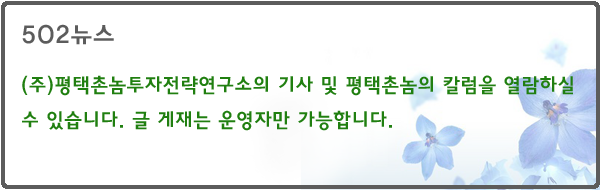
<style>
.page{position:relative;width:600px;height:190px;background:#ffffff}
.page>*{position:absolute;margin:0}
.t1{font:25px "HaanYGodic24";color:#5c5c5c}
.t2{font:20px "HaanYGodic24";color:#207e10}
</style>
<div class="page">
<p class="t1" style="left:22px;top:24px;width:92px;height:21px">502뉴스</p>
<p class="t2" style="left:22px;top:75px;width:551px;height:56px">(주)평택촌놈투자전략연구소의 기사 및 평택촌놈의 칼럼을 열람하실 수 있습니다. 글 게재는 운영자만 가능합니다.</p>
</div>
